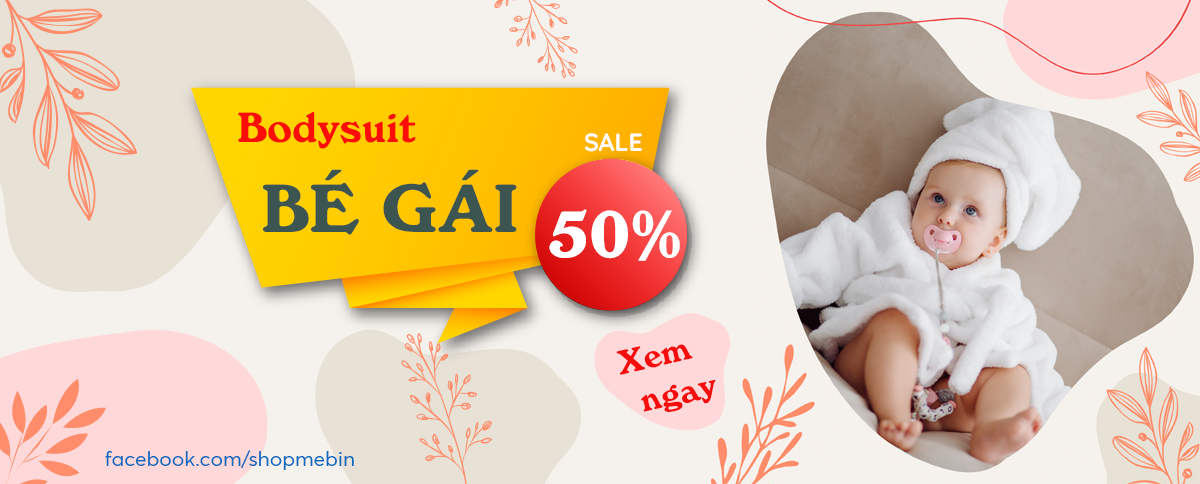
<style>
.page{position:relative;width:1200px;height:484px}
.page>*{position:absolute;margin:0}
.t1{font:41.7px "UTM-Windsor-BT";color:#fc0d07}
.t2{font:25px "Quicksand-Bold";color:#ffffff}
.t3{font:66.7px "UTM-Windsor-BT";color:#3c5551}
.t4{font:66.7px "UTM-Windsor-BT";color:#ffffff}
.t5{font:33.3px "UTM-Windsor-BT";color:#f60c0c}
.t6{font:20.8px "Baomoi-Regular";color:#0d6ac0}
</style>
<div class="page">
<p class="t1" style="left:238px;top:111px;width:178px;height:38px">Bodysuit</p>
<p class="t2" style="left:585px;top:133px;width:57px;height:19px">SALE</p>
<p class="t3" style="left:263px;top:169px;width:254px;height:66px">BÉ GÁI</p>
<p class="t4" style="left:549px;top:209px;width:131px;height:52px">50%</p>
<p class="t5" style="left:616px;top:344px;width:77px;height:31px;rotate:-13deg">Xem</p>
<p class="t5" style="left:641px;top:379px;width:75px;height:33px;rotate:-13deg">ngay</p>
<p class="t6" style="left:105px;top:450px;width:249px;height:20px">facebook.com/shopmebin</p>
</div>
